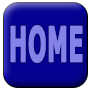
<style>
.page{position:relative;width:90px;height:90px;background:#050292}
.page>*{position:absolute;margin:0}
.t1{font:48px "Verdana-Bold";color:#8482e8;font-weight:bold;scale:0.46 1}
</style>
<div class="page">
<p class="t1" style="left:10px;top:25px;width:73px;height:38px">HOME</p>
</div>
